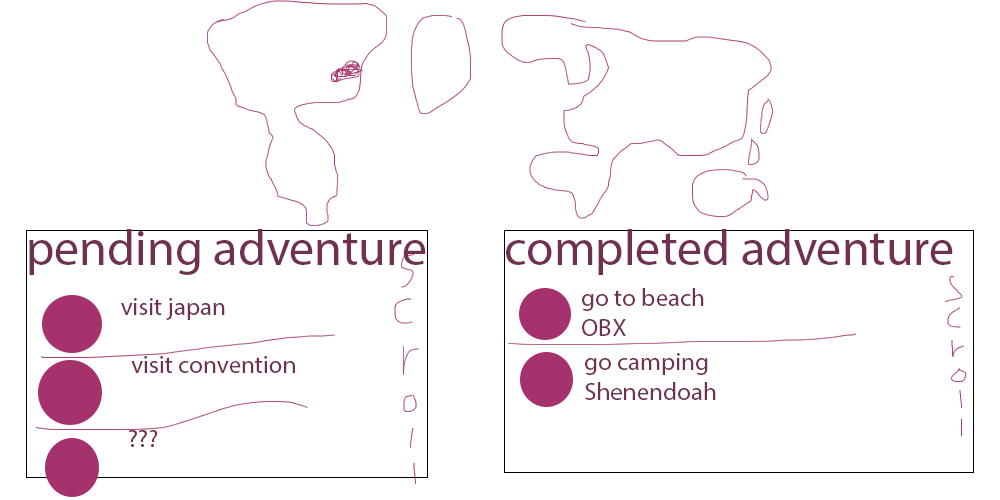
<style>
.page{position:relative;width:1000px;height:500px;background:#ffffff}
.page>*{position:absolute;margin:0}
.t1{font:12px "MyriadPro-Regular";color:#713051}
.t2{font:50px "MyriadPro-Regular";color:#713051}
.t3{font:25px "MyriadPro-Regular";color:#713051}
</style>
<div class="page">
<p class="t1" style="left:29px;top:229px;width:397px;height:46px">pending adventure</p>
<p class="t2" style="left:506px;top:229px;width:447px;height:46px">completed adventure</p>
<p class="t3" style="left:582px;top:288px;width:122px;height:48px">go to beach<br>OBX</p>
<p class="t3" style="left:121px;top:298px;width:104px;height:22px">visit japan</p>
<p class="t3" style="left:585px;top:353px;width:131px;height:47px">go camping<br>Shenendoah</p>
<p class="t3" style="left:131px;top:356px;width:164px;height:17px">visit convention</p>
<p class="t3" style="left:128px;top:430px;width:30px;height:17px">???</p>
</div>
